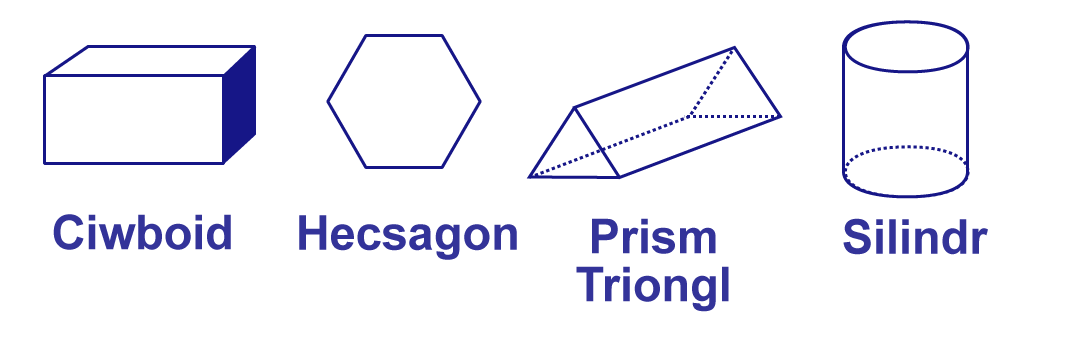
<style>
.page{position:relative;width:1072px;height:338px;background:#ffffff}
.page>*{position:absolute;margin:0}
.t1{font:48px "Arial-BoldMT";color:#333399}
.t2{font:48px/48px "Arial-BoldMT";color:#333399}
</style>
<div class="page">
<p class="t1" style="left:53px;top:214px;width:178px;height:36px">Ciwboid</p>
<p class="t1" style="left:299px;top:215px;width:218px;height:45px">Hecsagon</p>
<p class="t2" style="left:576px;top:218px;width:153px;height:94px;text-align:center">Prism<br>Triongl</p>
<p class="t1" style="left:843px;top:218px;width:145px;height:37px">Silindr</p>
</div>
